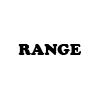
<style>
.page{position:relative;width:100px;height:100px;background:#ffffff}
.page>*{position:absolute;margin:0}
.t1{font:16px "CooperBlack";color:#000000}
</style>
<div class="page">
<p class="t1" style="left:18px;top:44px;width:63px;height:11px">RANGE</p>
</div>
